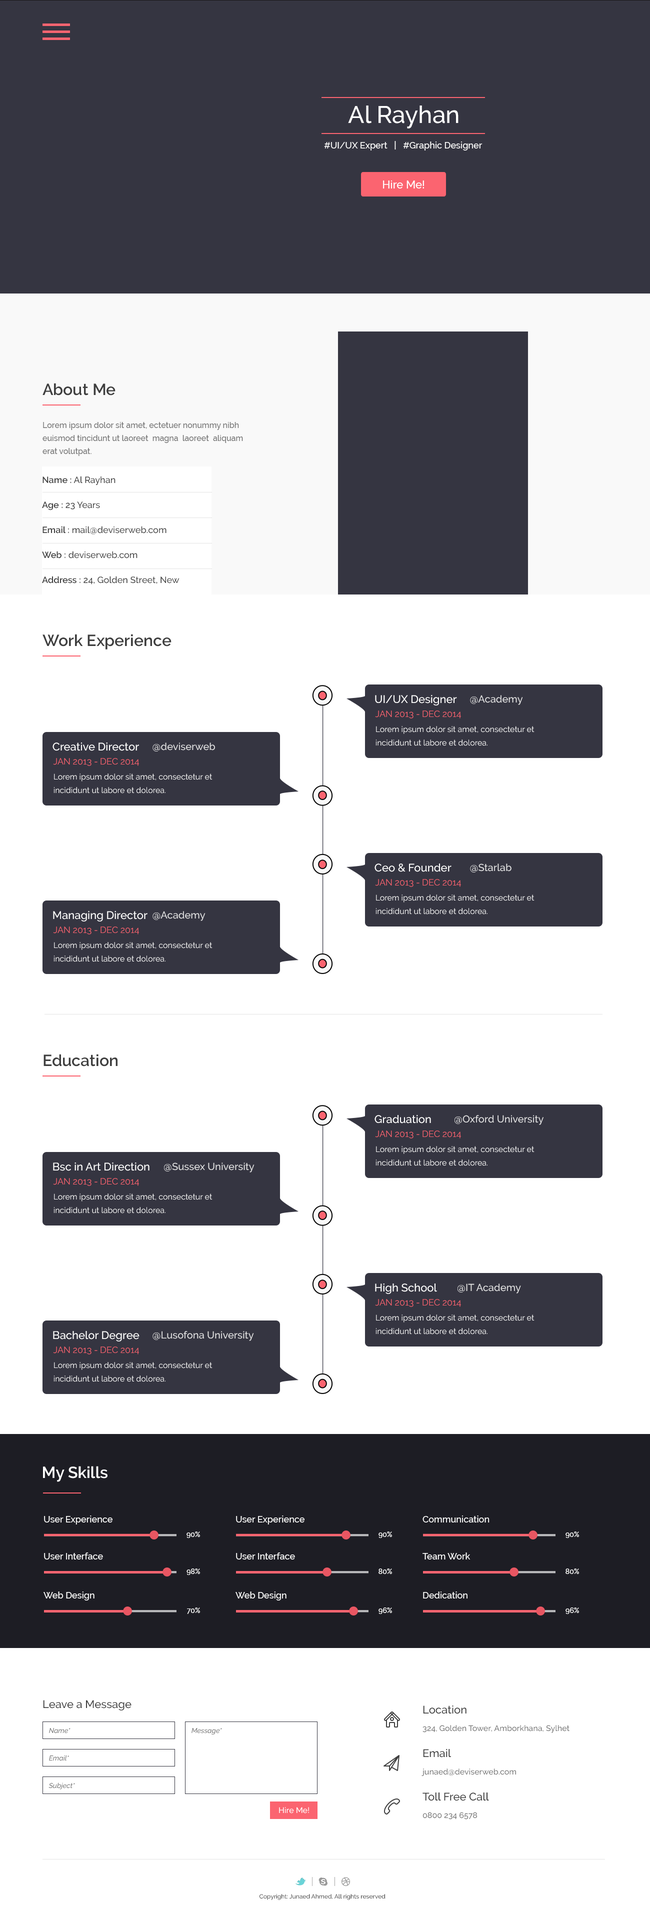
<style>
.page{position:relative;width:650px;height:1915px;background:#ffffff}
.page>*{position:absolute;margin:0}
.t1{font:24px "Raleway-Medium";color:#ffffff}
.t2{font:9px "Raleway-Medium";color:#ffffff}
.t3{font:9px "Raleway-Medium";color:#ffffff;text-transform:uppercase}
.t4{font:11px "Raleway-Medium";color:#ffffff}
.t5{font:16px "Raleway-SemiBold";color:#3e3e3e}
.t6{font:8px/13px "Raleway-Medium";color:#727272}
.t7{font:9px/25px "Raleway-Medium";color:#3e3e3e}
.t8{font:9px/25px "Raleway-SemiBold";color:#3e3e3e}
.t9{font:10px "Raleway-Medium";color:#e1e1e2}
.t10{font:9px "Raleway-Regular";color:#fb6470;text-transform:uppercase}
.t11{font:8px/13.8px "Raleway-Regular";color:#ffffff}
.t12{font:16px "Raleway-SemiBold";color:#ffffff}
.t13{font:7px "Raleway-Medium";color:#ffffff}
.t14{font:11px "Raleway-Medium";color:#3e3e3e}
.t15{font:7px "Raleway-MediumItalic";color:#747474}
.t16{font:8px "Raleway-Medium";color:#747474}
.t17{font:8px "Raleway-Medium";color:#ffffff}
.t18{font:6px "Raleway-Medium";color:#3e3e3e}
</style>
<div class="page">
<p class="t1" style="left:348px;top:106px;width:110px;height:22px">Al Rayhan</p>
<p class="t2" style="left:324px;top:141px;width:158px;height:9px"><span class="t3">#Ui/ux</span> Expert   |   #Graphic Designer</p>
<p class="t4" style="left:383px;top:180px;width:41px;height:8px">Hire Me!</p>
<p class="t5" style="left:42px;top:383px;width:74px;height:13px">About Me</p>
<p class="t6" style="left:42px;top:422px;width:201px;height:34px">Lorem ipsum dolor sit amet, ectetuer nonummy nibh euismod tincidunt ut laoreet  magna  laoreet  aliquam erat volutpat.</p>
<p class="t7" style="left:42px;top:476px;width:138px;height:108px"><span class="t8">Name :</span> Al Rayhan<br><span class="t8">Age :</span> 23 Years<br><span class="t8">Email :</span> mail@deviserweb.com<br><span class="t8">Web :</span> deviserweb.com<br><span class="t8">Address :</span> 24, Golden Street, New Castle</p>
<p class="t5" style="left:42px;top:634px;width:130px;height:16px">Work Experience</p>
<p class="t4" style="left:375px;top:695px;width:82px;height:11px">UI/UX Designer</p>
<p class="t9" style="left:470px;top:695px;width:53px;height:10px">@Academy</p>
<p class="t10" style="left:375px;top:710px;width:86px;height:8px">Jan 2013 - Dec 2014</p>
<p class="t11" style="left:376px;top:726px;width:158px;height:20px">Lorem ipsum dolor sit amet, consectetur et incididunt ut labore et dolorea.</p>
<p class="t4" style="left:52px;top:742px;width:87px;height:9px">Creative Director</p>
<p class="t9" style="left:152px;top:742px;width:63px;height:10px">@deviserweb</p>
<p class="t10" style="left:53px;top:758px;width:86px;height:8px">Jan 2013 - Dec 2014</p>
<p class="t11" style="left:54px;top:774px;width:158px;height:20px">Lorem ipsum dolor sit amet, consectetur et incididunt ut labore et dolorea.</p>
<p class="t4" style="left:374px;top:864px;width:78px;height:8px">Ceo &amp; Founder</p>
<p class="t9" style="left:470px;top:864px;width:42px;height:8px">@Starlab</p>
<p class="t10" style="left:375px;top:879px;width:86px;height:8px">Jan 2013 - Dec 2014</p>
<p class="t11" style="left:376px;top:894px;width:158px;height:20px">Lorem ipsum dolor sit amet, consectetur et incididunt ut labore et dolorea.</p>
<p class="t4" style="left:53px;top:911px;width:95px;height:11px">Managing Director</p>
<p class="t9" style="left:152px;top:911px;width:54px;height:10px">@Academy</p>
<p class="t10" style="left:53px;top:926px;width:86px;height:8px">Jan 2013 - Dec 2014</p>
<p class="t11" style="left:54px;top:942px;width:158px;height:20px">Lorem ipsum dolor sit amet, consectetur et incididunt ut labore et dolorea.</p>
<p class="t5" style="left:44px;top:1054px;width:74px;height:12px">Education</p>
<p class="t4" style="left:374px;top:1115px;width:57px;height:9px">Graduation</p>
<p class="t9" style="left:454px;top:1115px;width:90px;height:10px">@Oxford University</p>
<p class="t10" style="left:375px;top:1130px;width:86px;height:8px">Jan 2013 - Dec 2014</p>
<p class="t11" style="left:376px;top:1146px;width:158px;height:20px">Lorem ipsum dolor sit amet, consectetur et incididunt ut labore et dolorea.</p>
<p class="t4" style="left:53px;top:1162px;width:97px;height:9px">Bsc in Art Direction</p>
<p class="t9" style="left:164px;top:1162px;width:90px;height:10px">@Sussex University</p>
<p class="t10" style="left:53px;top:1178px;width:86px;height:8px">Jan 2013 - Dec 2014</p>
<p class="t11" style="left:54px;top:1194px;width:158px;height:20px">Lorem ipsum dolor sit amet, consectetur et incididunt ut labore et dolorea.</p>
<p class="t4" style="left:375px;top:1284px;width:62px;height:10px">High School</p>
<p class="t9" style="left:458px;top:1284px;width:63px;height:10px">@IT Academy</p>
<p class="t10" style="left:375px;top:1299px;width:86px;height:8px">Jan 2013 - Dec 2014</p>
<p class="t11" style="left:376px;top:1314px;width:158px;height:20px">Lorem ipsum dolor sit amet, consectetur et incididunt ut labore et dolorea.</p>
<p class="t4" style="left:53px;top:1331px;width:87px;height:11px">Bachelor Degree</p>
<p class="t9" style="left:152px;top:1331px;width:102px;height:10px">@Lusofona University</p>
<p class="t10" style="left:53px;top:1346px;width:86px;height:8px">Jan 2013 - Dec 2014</p>
<p class="t11" style="left:54px;top:1362px;width:158px;height:20px">Lorem ipsum dolor sit amet, consectetur et incididunt ut labore et dolorea.</p>
<p class="t12" style="left:43px;top:1466px;width:65px;height:16px">My Skills</p>
<p class="t2" style="left:44px;top:1516px;width:68px;height:8px">User Experience</p>
<p class="t2" style="left:236px;top:1516px;width:68px;height:8px">User Experience</p>
<p class="t2" style="left:422px;top:1516px;width:68px;height:6px">Communication</p>
<p class="t13" style="left:186px;top:1532px;width:14px;height:6px">90%</p>
<p class="t13" style="left:378px;top:1532px;width:14px;height:6px">90%</p>
<p class="t13" style="left:566px;top:1532px;width:13px;height:6px">90%</p>
<p class="t2" style="left:44px;top:1552px;width:59px;height:8px">User Interface</p>
<p class="t2" style="left:236px;top:1552px;width:59px;height:8px">User Interface</p>
<p class="t2" style="left:422px;top:1552px;width:48px;height:8px">Team Work</p>
<p class="t13" style="left:186px;top:1568px;width:14px;height:7px">98%</p>
<p class="t13" style="left:378px;top:1568px;width:14px;height:6px">80%</p>
<p class="t13" style="left:566px;top:1568px;width:13px;height:6px">80%</p>
<p class="t2" style="left:44px;top:1592px;width:50px;height:8px">Web Design</p>
<p class="t2" style="left:236px;top:1592px;width:50px;height:8px">Web Design</p>
<p class="t2" style="left:423px;top:1592px;width:45px;height:6px">Dedication</p>
<p class="t13" style="left:187px;top:1608px;width:13px;height:6px">70%</p>
<p class="t13" style="left:378px;top:1608px;width:14px;height:6px">96%</p>
<p class="t13" style="left:566px;top:1608px;width:13px;height:6px">96%</p>
<p class="t14" style="left:43px;top:1700px;width:89px;height:10px">Leave a Message</p>
<p class="t14" style="left:423px;top:1706px;width:43px;height:8px">Location</p>
<p class="t15" style="left:49px;top:1728px;width:21px;height:6px">Name*</p>
<p class="t15" style="left:192px;top:1728px;width:30px;height:6px">Message*</p>
<p class="t16" style="left:422px;top:1725px;width:148px;height:8px">324, Golden Tower, Amborkhana, Sylhet</p>
<p class="t15" style="left:49px;top:1755px;width:20px;height:6px">Email*</p>
<p class="t14" style="left:423px;top:1749px;width:28px;height:9px">Email</p>
<p class="t16" style="left:422px;top:1768px;width:94px;height:8px">junaed@deviserweb.com</p>
<p class="t15" style="left:48px;top:1782px;width:27px;height:8px">Subject*</p>
<p class="t14" style="left:422px;top:1792px;width:67px;height:9px">Toll Free Call</p>
<p class="t17" style="left:279px;top:1807px;width:30px;height:7px">Hire Me!</p>
<p class="t16" style="left:422px;top:1812px;width:55px;height:8px">0800 234 6578</p>
<p class="t18" style="left:260px;top:1894px;width:126px;height:6px">Copyright: Junaed Ahmed, All rights reserved</p>
</div>
